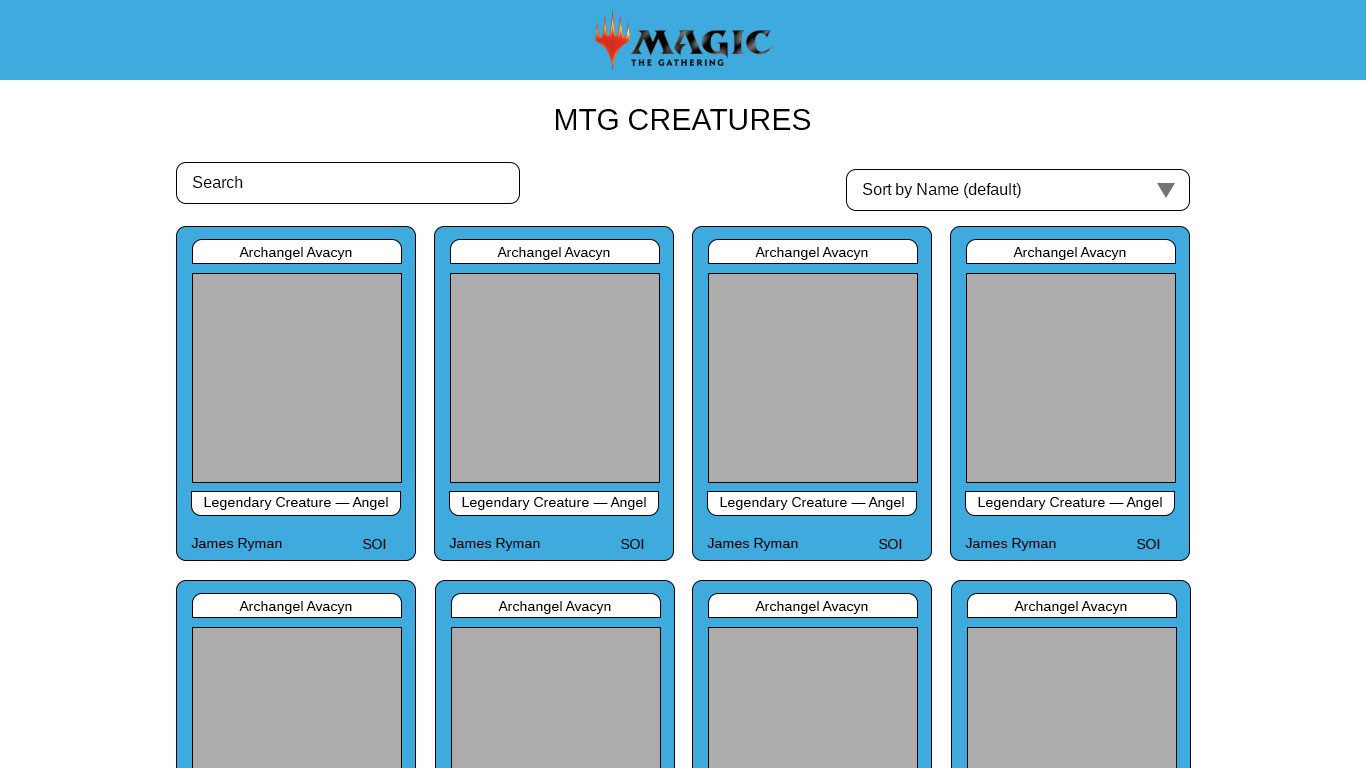
<style>
.page{position:relative;width:1366px;height:768px;background:#ffffff}
.page>*{position:absolute;margin:0}
.t1{font:30px "Arimo";color:#000000}
.t2{font:16px "Arimo";color:#000000}
.t3{font:14px "Arimo";color:#000000}
</style>
<div class="page">
<p class="t1" style="left:556px;top:109px;width:255px;height:21px">MTG CREATURES</p>
<p class="t2" style="left:193px;top:176px;width:50px;height:12px">Search</p>
<p class="t2" style="left:863px;top:183px;width:158px;height:15px">Sort by Name (default)</p>
<p class="t3" style="left:239px;top:247px;width:113px;height:13px">Archangel Avacyn</p>
<p class="t3" style="left:497px;top:247px;width:113px;height:13px">Archangel Avacyn</p>
<p class="t3" style="left:755px;top:247px;width:113px;height:13px">Archangel Avacyn</p>
<p class="t3" style="left:1013px;top:247px;width:113px;height:13px">Archangel Avacyn</p>
<p class="t3" style="left:204px;top:497px;width:184px;height:13px">Legendary Creature — Angel</p>
<p class="t3" style="left:462px;top:497px;width:184px;height:13px">Legendary Creature — Angel</p>
<p class="t3" style="left:720px;top:497px;width:184px;height:13px">Legendary Creature — Angel</p>
<p class="t3" style="left:978px;top:497px;width:184px;height:13px">Legendary Creature — Angel</p>
<p class="t3" style="left:191px;top:538px;width:91px;height:13px">James Ryman</p>
<p class="t3" style="left:363px;top:539px;width:23px;height:10px">SOI</p>
<p class="t3" style="left:449px;top:538px;width:91px;height:13px">James Ryman</p>
<p class="t3" style="left:621px;top:539px;width:23px;height:10px">SOI</p>
<p class="t3" style="left:707px;top:538px;width:91px;height:13px">James Ryman</p>
<p class="t3" style="left:879px;top:539px;width:23px;height:10px">SOI</p>
<p class="t3" style="left:965px;top:538px;width:91px;height:13px">James Ryman</p>
<p class="t3" style="left:1137px;top:539px;width:23px;height:10px">SOI</p>
<p class="t3" style="left:239px;top:601px;width:113px;height:13px">Archangel Avacyn</p>
<p class="t3" style="left:498px;top:601px;width:113px;height:13px">Archangel Avacyn</p>
<p class="t3" style="left:755px;top:601px;width:113px;height:13px">Archangel Avacyn</p>
<p class="t3" style="left:1014px;top:601px;width:113px;height:13px">Archangel Avacyn</p>
</div>
